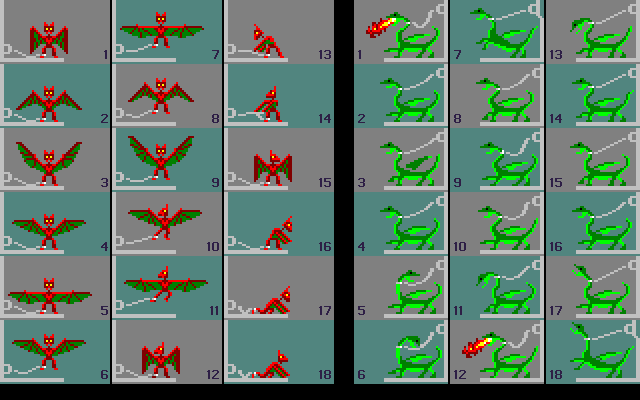
<style>
.page{position:relative;width:640px;height:400px;background:#808080}
.page>*{position:absolute;margin:0}
.t1{font:8px/64px "Standard0965";color:#2e1f46}
</style>
<div class="page">
<p class="t1" style="left:101px;top:50px;width:7px;height:329px;text-align:right">1<br>2<br>3<br>4<br>5<br>6</p>
<p class="t1" style="left:207px;top:50px;width:12px;height:329px;text-align:right">7<br>8<br>9<br>10<br>11<br>12</p>
<p class="t1" style="left:319px;top:50px;width:12px;height:329px;text-align:right">13<br>14<br>15<br>16<br>17<br>18</p>
<p class="t1" style="left:358px;top:50px;width:7px;height:329px">1<br>2<br>3<br>4<br>5<br>6</p>
<p class="t1" style="left:454px;top:50px;width:12px;height:329px">7<br>8<br>9<br>10<br>11<br>12</p>
<p class="t1" style="left:550px;top:50px;width:12px;height:329px">13<br>14<br>15<br>16<br>17<br>18</p>
</div>
